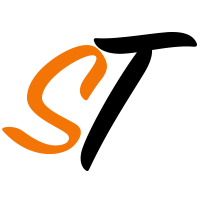
<style>
.page{position:relative;width:200px;height:200px;background:#ffffff}
.page>*{position:absolute;margin:0}
.t1{font:223.2px "SignPainter-HouseScript";letter-spacing:0.012em;color:#000000;scale:1.1 1}
.t2{font:171.2px "SignPainter-HouseScript";letter-spacing:0.012em;color:#f27506;scale:1.1 1}
</style>
<div class="page">
<p class="t1" style="left:80px;top:32px;width:118px;height:139px">T</p>
<p class="t2" style="left:2px;top:45px;width:105px;height:110px">S</p>
</div>
